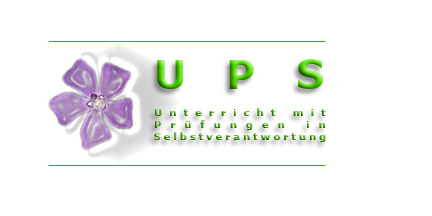
<style>
.page{position:relative;width:432px;height:216px;background:#ffffff}
.page>*{position:absolute;margin:0}
.t1{font:40px "Verdana-Bold";letter-spacing:1em}
.t2{font:10px "Verdana-Bold";letter-spacing:0.3em}
.t3{font:10px "Verdana-Bold";letter-spacing:0.71em}
.t4{font:10px "Verdana-Bold"}
.t5{font:10px "Verdana-Bold";letter-spacing:0.9em}
</style>
<div class="page">
<p class="t1" style="left:157px;top:59px;width:166px;height:30px">UPS</p>
<p class="t2" style="left:154px;top:108px;width:172px;height:34px;text-align:center"><span class="t3">Unterricht mi</span><span class="t4">t<br></span><span class="t5">Prüfungen i</span><span class="t4">n<br></span>Selbstverantwortun<span class="t4">g</span></p>
</div>
